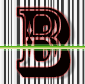
<style>
.page{position:relative;width:85px;height:84px;background:#070100}
.page>*{position:absolute;margin:0}
.t1{font:92.3px "RosewoodStd-Regular";color:#070100}
</style>
<div class="page">
<p class="t1" style="left:17px;top:7px;width:53px;height:70px">B</p>
</div>
